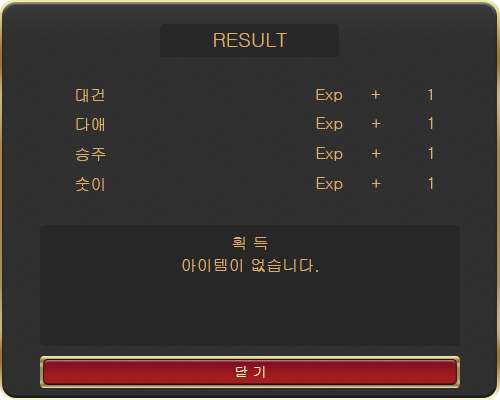
<style>
.page{position:relative;width:500px;height:400px;background:#272727}
.page>*{position:absolute;margin:0}
.t1{font:20px "Gulim";color:#dcad69}
.t2{font:16px "Gulim";color:#dcad69}
.t3{font:16.1px "Gulim";color:#dcad69}
.t4{font:14px "Gulim";color:#f7f7bd}
</style>
<div class="page">
<p class="t1" style="left:214px;top:33px;width:73px;height:14px">RESULT</p>
<p class="t2" style="left:76px;top:89px;width:28px;height:13px">대건</p>
<p class="t2" style="left:316px;top:89px;width:116px;height:13px">Exp + 1</p>
<p class="t3" style="left:76px;top:118px;width:28px;height:13px">다애</p>
<p class="t3" style="left:316px;top:117px;width:117px;height:14px">Exp + 1</p>
<p class="t3" style="left:75px;top:148px;width:31px;height:13px">승주</p>
<p class="t3" style="left:316px;top:147px;width:117px;height:14px">Exp + 1</p>
<p class="t3" style="left:75px;top:177px;width:29px;height:14px">숫이</p>
<p class="t3" style="left:316px;top:177px;width:117px;height:14px">Exp + 1</p>
<p class="t2" style="left:232px;top:237px;width:36px;height:13px">획 득</p>
<p class="t2" style="left:172px;top:254px;width:45px;height:13px">생명력</p>
<p class="t2" style="left:182px;top:259px;width:136px;height:13px">아이템이 없습니다.</p>
<p class="t4" style="left:236px;top:366px;width:29px;height:12px">닫 기</p>
</div>
